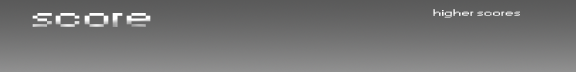
<style>
.page{position:relative;width:576px;height:72px}
.page>*{position:absolute;margin:0}
.t1{font:30px "Small Fonts";scale:2.02 1}
.t2{font:9px "Small Fonts";color:#ffffff;scale:2.02 1}
</style>
<div class="page">
<p class="t1" style="left:32px;top:13px;width:119px;height:14px">score</p>
<p class="t2" style="left:433px;top:9px;width:87px;height:9px">higher scores</p>
</div>
